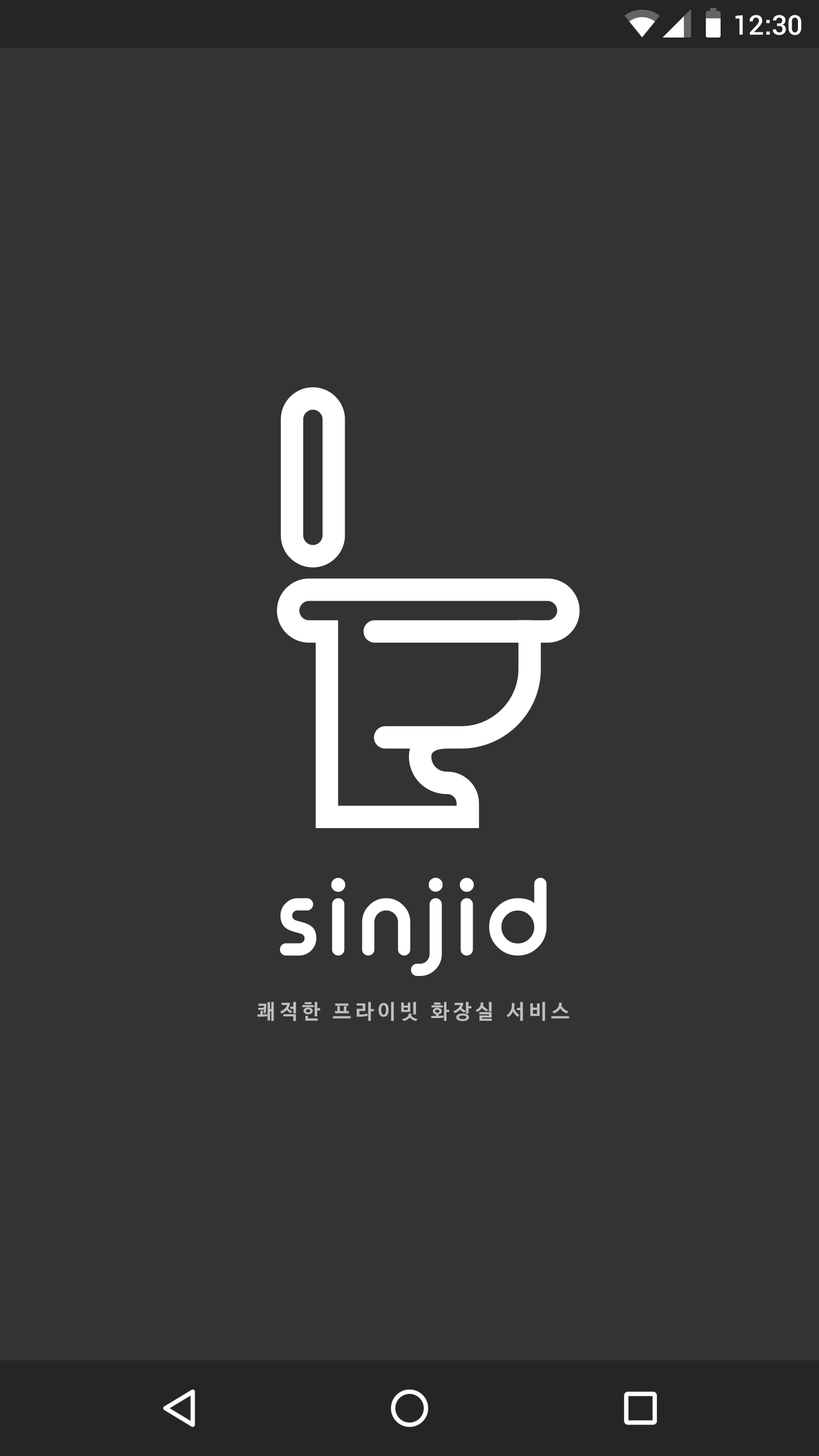
<style>
.page{position:relative;width:819px;height:1456px;background:#333333}
.page>*{position:absolute;margin:0}
.t1{font:27.3px "Roboto-Medium";color:#ffffff}
.t2{font:20.5px "NanumBarunGothicBold";letter-spacing:0.2em;color:#bfbfbf}
</style>
<div class="page">
<p class="t1" style="left:735px;top:15px;width:66px;height:20px">12:30</p>
<p class="t2" style="left:257px;top:1002px;width:312px;height:19px">쾌적한 프라이빗 화장실 서비스</p>
</div>
